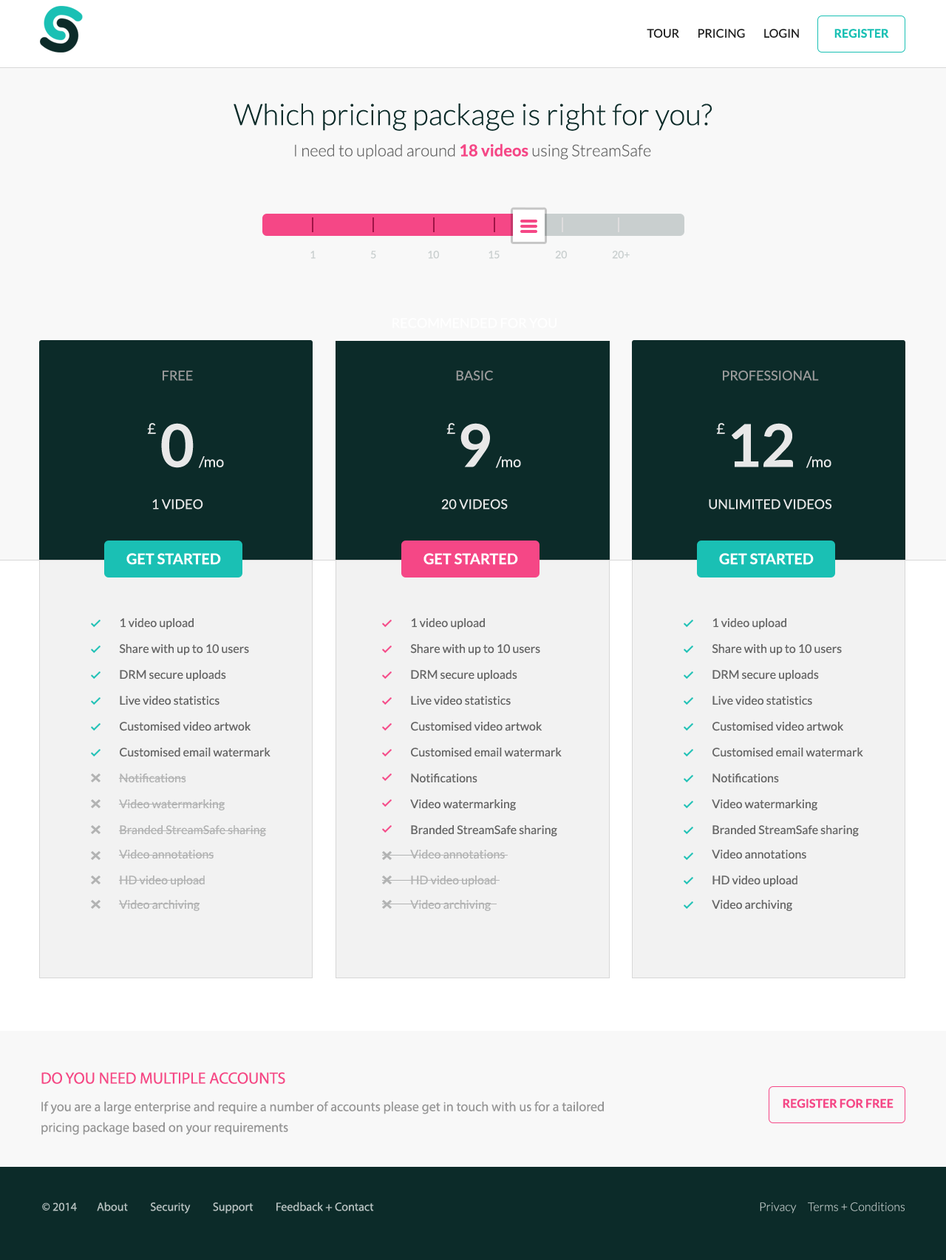
<style>
.page{position:relative;width:946px;height:1260px;background:#f8f8f8}
.page>*{position:absolute;margin:0}
.t1{font:29.6px "Lato-Light";color:#0c2b29}
.t2{font:16.3px "Lato-Light";color:#666666}
.t3{font:16.3px "Lato-Bold";color:#f54786}
.t4{font:13.3px "Lato-Regular";color:#ffffff}
.t5{font:13.3px "Lato-Regular";color:#9b9b9b}
.t6{font:14.8px "Lato-Regular";color:#e8e8e8}
.t7{font:59.2px "Lato-Bold";color:#e8e8e8}
.t8{font:13.3px "Lato-Regular";color:#e8e8e8}
.t9{font:14.8px "Lato-Bold";color:#ffffff}
.t10{font:11.8px "Lato-Regular";color:#666666}
.t11{font:11.8px "Lato-Regular";color:#b2b3b3}
.t12{font:16.3px "MyriadPro-Regular";color:#f54786;text-transform:uppercase}
.t13{font:13.3px/20.7px "MyriadPro-Regular";color:#969696}
</style>
<div class="page">
<p class="t1" style="left:234px;top:104px;width:478px;height:27px">Which pricing package is right for you?</p>
<p class="t2" style="left:295px;top:143px;width:356px;height:17px">I need to upload around <span class="t3">18 videos</span> using StreamSafe</p>
<p class="t4" style="left:393px;top:318px;width:164px;height:10px">RECOMMENDED FOR YOU</p>
<p class="t5" style="left:163px;top:370px;width:30px;height:11px">FREE</p>
<p class="t5" style="left:456px;top:370px;width:37px;height:11px">BASIC</p>
<p class="t5" style="left:723px;top:370px;width:96px;height:11px">PROFESSIONAL</p>
<p class="t6" style="left:147px;top:423px;width:9px;height:11px">£</p>
<p class="t7" style="left:161px;top:423px;width:33px;height:45px">0</p>
<p class="t6" style="left:447px;top:423px;width:8px;height:11px">£</p>
<p class="t7" style="left:461px;top:423px;width:29px;height:44px">9</p>
<p class="t6" style="left:716px;top:423px;width:9px;height:11px">£</p>
<p class="t7" style="left:732px;top:423px;width:61px;height:44px">12</p>
<p class="t6" style="left:198px;top:456px;width:26px;height:12px">/mo</p>
<p class="t6" style="left:495px;top:456px;width:26px;height:12px">/mo</p>
<p class="t6" style="left:806px;top:456px;width:26px;height:12px">/mo</p>
<p class="t8" style="left:152px;top:499px;width:51px;height:10px">1 VIDEO</p>
<p class="t8" style="left:441px;top:499px;width:67px;height:10px">20 VIDEOS</p>
<p class="t8" style="left:709px;top:499px;width:123px;height:10px">UNLIMITED VIDEOS</p>
<p class="t9" style="left:126px;top:553px;width:95px;height:12px">GET STARTED</p>
<p class="t9" style="left:424px;top:553px;width:94px;height:12px">GET STARTED</p>
<p class="t9" style="left:719px;top:553px;width:95px;height:12px">GET STARTED</p>
<p class="t10" style="left:120px;top:618px;width:74px;height:11px">1 video upload</p>
<p class="t10" style="left:411px;top:618px;width:74px;height:11px">1 video upload</p>
<p class="t10" style="left:713px;top:618px;width:74px;height:11px">1 video upload</p>
<p class="t10" style="left:119px;top:644px;width:130px;height:11px">Share with up to 10 users</p>
<p class="t10" style="left:410px;top:644px;width:130px;height:11px">Share with up to 10 users</p>
<p class="t10" style="left:712px;top:644px;width:130px;height:11px">Share with up to 10 users</p>
<p class="t10" style="left:120px;top:670px;width:106px;height:11px">DRM secure uploads</p>
<p class="t10" style="left:411px;top:670px;width:107px;height:11px">DRM secure uploads</p>
<p class="t10" style="left:713px;top:670px;width:106px;height:11px">DRM secure uploads</p>
<p class="t10" style="left:120px;top:696px;width:100px;height:9px">Live video statistics</p>
<p class="t10" style="left:411px;top:696px;width:100px;height:9px">Live video statistics</p>
<p class="t10" style="left:713px;top:696px;width:100px;height:9px">Live video statistics</p>
<p class="t10" style="left:120px;top:722px;width:131px;height:9px">Customised video artwok</p>
<p class="t10" style="left:411px;top:722px;width:132px;height:9px">Customised video artwok</p>
<p class="t10" style="left:713px;top:722px;width:131px;height:9px">Customised video artwok</p>
<p class="t10" style="left:120px;top:748px;width:151px;height:9px">Customised email watermark</p>
<p class="t10" style="left:411px;top:748px;width:151px;height:9px">Customised email watermark</p>
<p class="t10" style="left:713px;top:748px;width:151px;height:9px">Customised email watermark</p>
<p class="t11" style="left:120px;top:773px;width:66px;height:10px">Notifications</p>
<p class="t10" style="left:411px;top:773px;width:67px;height:10px">Notifications</p>
<p class="t10" style="left:713px;top:773px;width:66px;height:10px">Notifications</p>
<p class="t11" style="left:119px;top:799px;width:106px;height:11px">Video watermarking</p>
<p class="t10" style="left:410px;top:799px;width:106px;height:11px">Video watermarking</p>
<p class="t10" style="left:712px;top:799px;width:106px;height:11px">Video watermarking</p>
<p class="t11" style="left:120px;top:825px;width:146px;height:11px">Branded StreamSafe sharing</p>
<p class="t10" style="left:411px;top:825px;width:147px;height:11px">Branded StreamSafe sharing</p>
<p class="t10" style="left:713px;top:825px;width:146px;height:11px">Branded StreamSafe sharing</p>
<p class="t11" style="left:119px;top:850px;width:95px;height:9px">Video annotations</p>
<p class="t11" style="left:410px;top:850px;width:95px;height:9px">Video annotations</p>
<p class="t10" style="left:712px;top:850px;width:95px;height:9px">Video annotations</p>
<p class="t11" style="left:120px;top:875px;width:85px;height:12px">HD video upload</p>
<p class="t11" style="left:411px;top:875px;width:85px;height:12px">HD video upload</p>
<p class="t10" style="left:713px;top:875px;width:85px;height:12px">HD video upload</p>
<p class="t11" style="left:119px;top:900px;width:81px;height:11px">Video archiving</p>
<p class="t11" style="left:410px;top:900px;width:81px;height:11px">Video archiving</p>
<p class="t10" style="left:712px;top:900px;width:81px;height:11px">Video archiving</p>
<p class="t12" style="left:41px;top:1072px;width:244px;height:12px">Do you need multiple accounts</p>
<p class="t13" style="left:41px;top:1101px;width:563px;height:34px">If you are a large enterprise and require a number of accounts please get in touch with us for a tailored pricing package based on your requirements</p>
</div>
